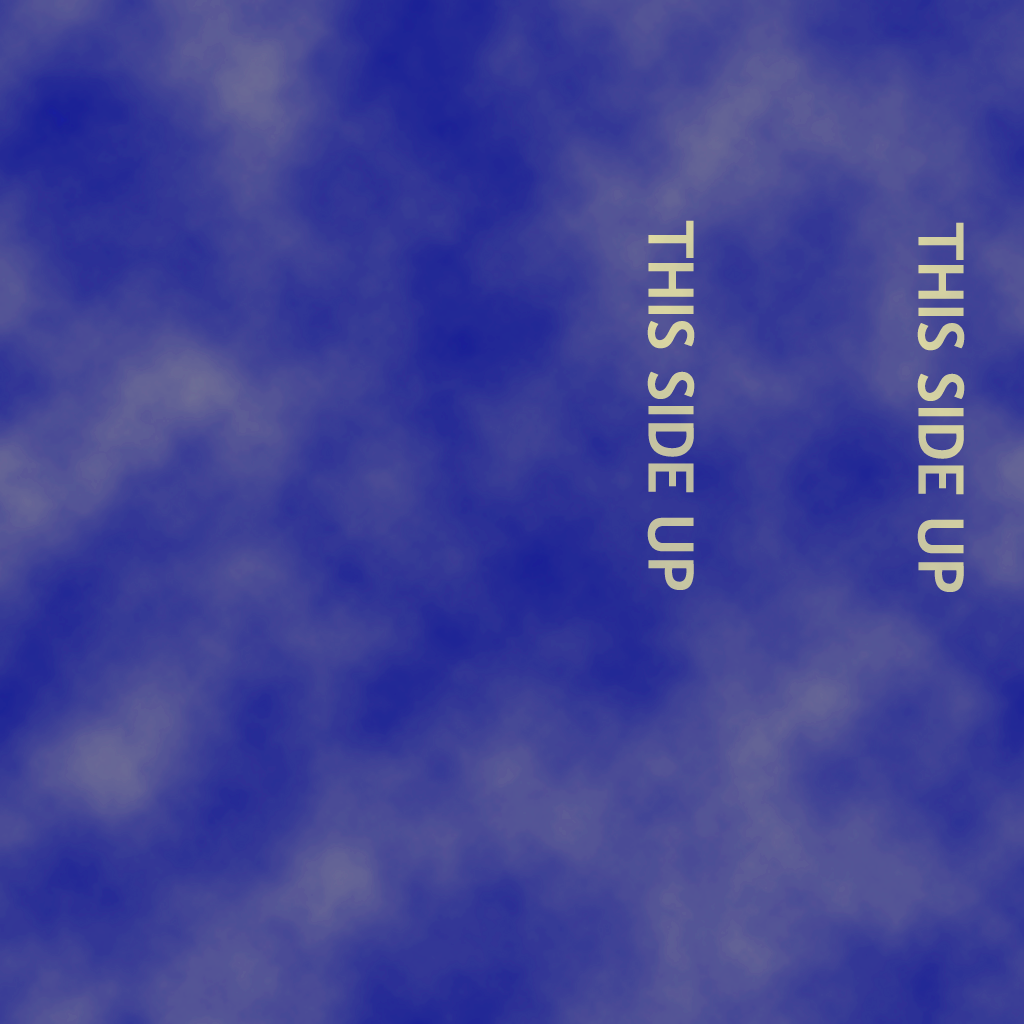
<style>
.page{position:relative;width:1024px;height:1024px}
.page>*{position:absolute;margin:0}
.t1{font:62.5px "TrebuchetMS-Bold";color:#c9c7a2}
.t2{font:62.5px "TrebuchetMS-Bold";color:#cfcda2}
</style>
<div class="page">
<p class="t1" style="left:647px;top:220px;width:48px;height:370px;rotate:90deg">THIS SIDE UP</p>
<p class="t2" style="left:917px;top:222px;width:48px;height:370px;rotate:90deg">THIS SIDE UP</p>
</div>
